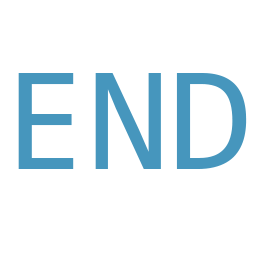
<style>
.page{position:relative;width:256px;height:256px;background:#ffffff}
.page>*{position:absolute;margin:0}
.t1{font:150px "Consolas";color:#4696bd}
</style>
<div class="page">
<p class="t1" style="left:18px;top:73px;width:229px;height:96px">END</p>
</div>
